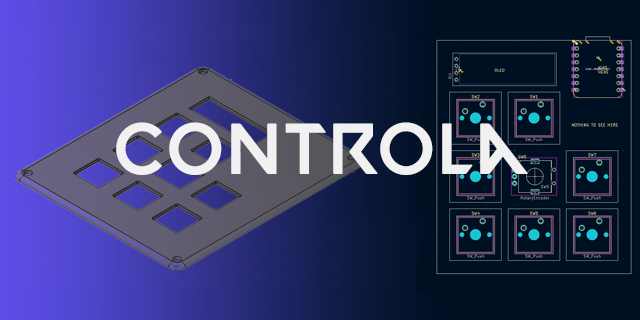
<style>
.page{position:relative;width:640px;height:320px;background:#001023}
.page>*{position:absolute;margin:0}
.t1{font:72px "VALORANT-Regular";letter-spacing:0.025em;color:#f1f1f1}
</style>
<div class="page">
<p class="t1" style="left:116px;top:122px;width:412px;height:53px">controla</p>
</div>
